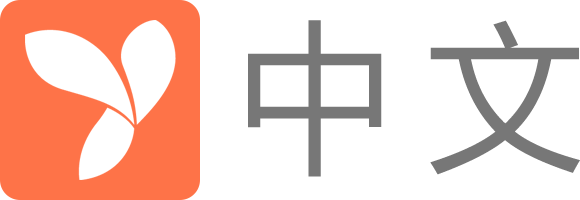
<style>
.page{position:relative;width:580px;height:200px;background:#ffffff}
.page>*{position:absolute;margin:0}
.t1{font:174.9px "MI-LANTING_GB-OUTSIDE-YS";letter-spacing:0.12em;color:#777777}
</style>
<div class="page">
<p class="t1" style="left:248px;top:20px;width:332px;height:157px">中文</p>
</div>
